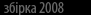
<style>
.page{position:relative;width:91px;height:15px;background:#000000}
.page>*{position:absolute;margin:0}
.t1{font:16px "MyriadPro-Cond";color:#666666}
</style>
<div class="page">
<p class="t1" style="left:4px;top:2px;width:60px;height:14px">збірка 2008</p>
</div>
